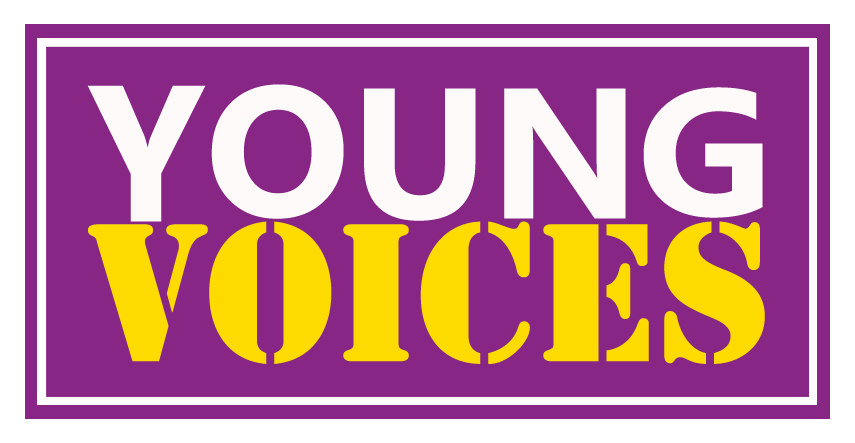
<style>
.page{position:relative;width:855px;height:443px;background:#872685}
.page>*{position:absolute;margin:0}
.t1{font:185.2px "KhmerUI-Bold";color:#fffafa;scale:1.04 1}
.t2{font:193.6px "KhmerUI-Bold";color:#fffafa}
.t3{font:179.6px "KhmerUI-Bold";color:#fffafa;scale:1.07 1}
.t4{font:182.7px "StencilStd";color:#fdda00}
</style>
<div class="page">
<p class="t1" style="left:87px;top:84px;width:676px;height:138px"><span class="t2">Y</span>OUN<span class="t3">G</span></p>
<p class="t4" style="left:88px;top:221px;width:677px;height:143px">Voices</p>
</div>
